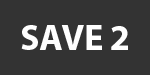
<style>
.page{position:relative;width:150px;height:75px;background:#333333}
.page>*{position:absolute;margin:0}
.t1{font:36px "MyriadPro-Bold";color:#ffffff}
</style>
<div class="page">
<p class="t1" style="left:21px;top:25px;width:107px;height:25px">SAVE 2</p>
</div>
